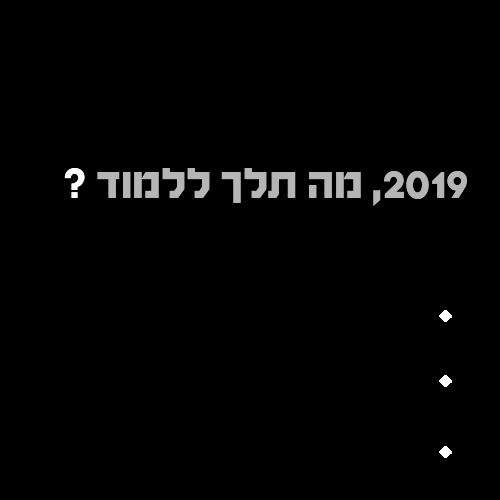
<style>
.page{position:relative;width:500px;height:500px;background:#000000}
.page>*{position:absolute;margin:0}
.t1{font:45.8px "HaimG-Regular";color:#b5b5b5}
.t2{font:45.8px "HaimG-Regular";color:#ffffff}
</style>
<div class="page">
<p class="t1" style="left:64px;top:168px;width:403px;height:38px">2019, מה תלך ללמוד <span class="t2">?</span></p>
</div>
